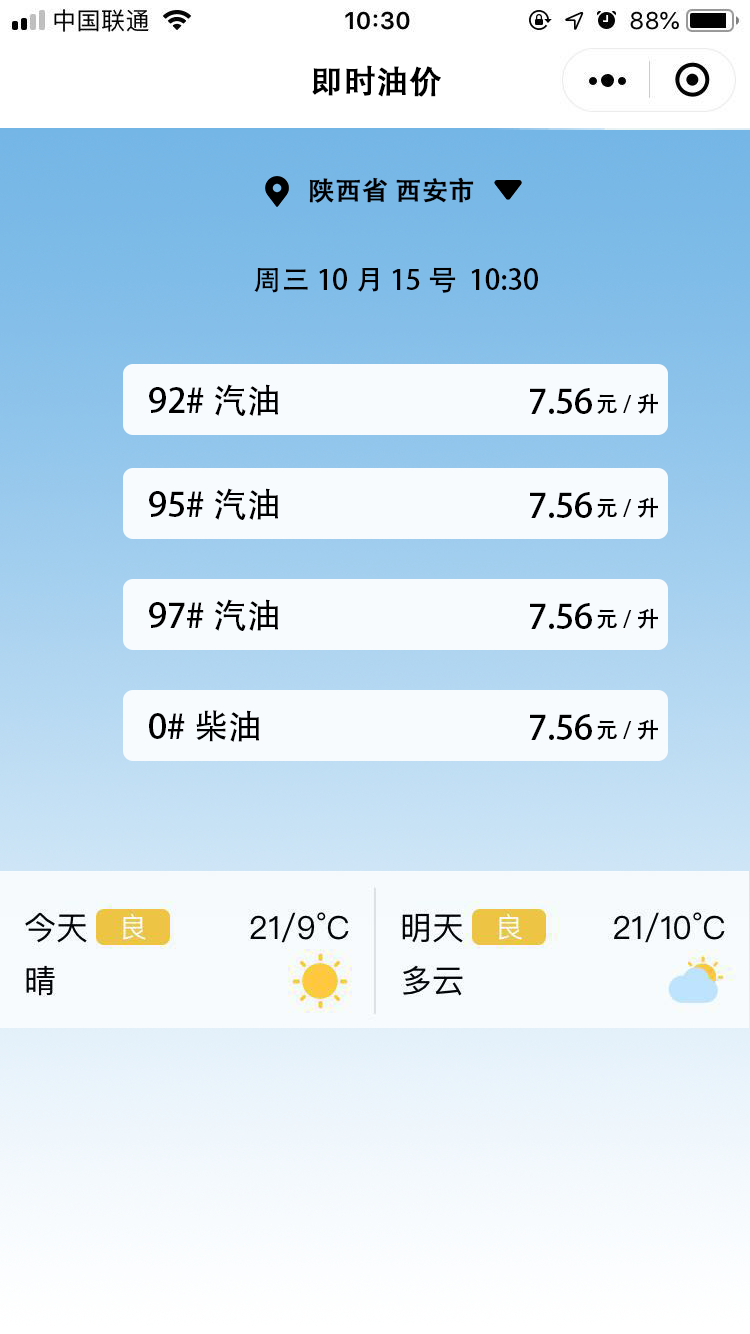
<style>
.page{position:relative;width:750px;height:1334px;background:#f7fbfe}
.page>*{position:absolute;margin:0}
.t1{font:32px "AdobeHeitiStd-Regular";color:#000000;font-weight:bold}
.t2{font:26px "AdobeHeitiStd-Regular";color:#000000;font-weight:bold}
.t3{font:28px "AdobeHeitiStd-Regular";color:#000000}
.t4{font:34px "AdobeHeitiStd-Regular";color:#000000}
.t5{font:22px "AdobeHeitiStd-Regular";color:#000000}
</style>
<div class="page">
<p class="t1" style="left:312px;top:65px;width:129px;height:32px">即时油价</p>
<p class="t2" style="left:309px;top:177px;width:165px;height:26px">陕西省 西安市</p>
<p class="t3" style="left:254px;top:267px;width:284px;height:26px">周三10月15号  10:30</p>
<p class="t4" style="left:149px;top:384px;width:129px;height:32px">92#汽油</p>
<p class="t4" style="left:530px;top:388px;width:62px;height:26px">7.56</p>
<p class="t5" style="left:597px;top:393px;width:61px;height:21px">元/升</p>
<p class="t4" style="left:149px;top:488px;width:129px;height:32px">95#汽油</p>
<p class="t4" style="left:530px;top:492px;width:62px;height:26px">7.56</p>
<p class="t5" style="left:597px;top:497px;width:61px;height:21px">元/升</p>
<p class="t4" style="left:149px;top:599px;width:129px;height:32px">97#汽油</p>
<p class="t4" style="left:530px;top:603px;width:62px;height:26px">7.56</p>
<p class="t5" style="left:597px;top:608px;width:61px;height:21px">元/升</p>
<p class="t4" style="left:149px;top:710px;width:110px;height:32px">0#柴油</p>
<p class="t4" style="left:530px;top:714px;width:62px;height:26px">7.56</p>
<p class="t5" style="left:597px;top:719px;width:61px;height:21px">元/升</p>
</div>
